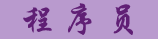
<style>
.page{position:relative;width:158px;height:39px;background:#b99ace}
.page>*{position:absolute;margin:0}
.t1{font:34px "STXingkai";color:#601f75}
</style>
<div class="page">
<p class="t1" style="left:23px;top:3px;width:110px;height:32px">程 序 员</p>
</div>
